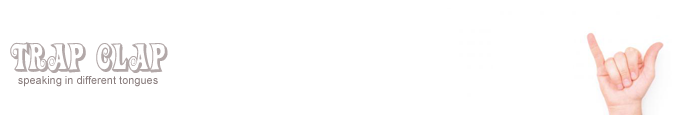
<style>
.page{position:relative;width:690px;height:115px;background:#ffffff}
.page>*{position:absolute;margin:0}
.t1{font:36px "ActionIs,ShadedJL";color:#b2a8a8}
.t2{font:11px "ArialMT";color:#8a7e7e}
</style>
<div class="page">
<p class="t1" style="left:10px;top:42px;width:158px;height:31px">Trap Clap</p>
<p class="t2" style="left:18px;top:76px;width:140px;height:11px">speaking in different tongues</p>
</div>
